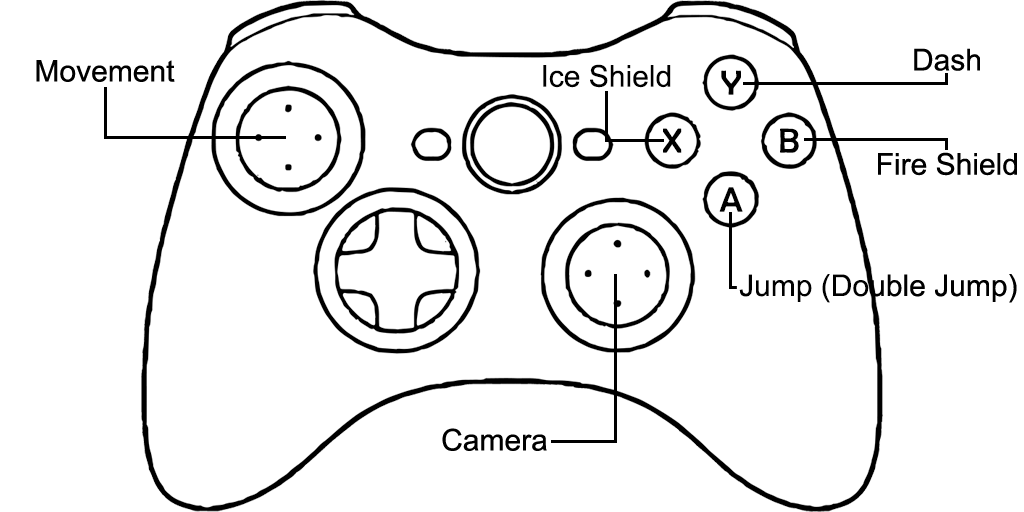
<style>
.page{position:relative;width:1024px;height:512px;background:#ffffff}
.page>*{position:absolute;margin:0}
.t1{font:30px "ArialMT";color:#000000}
.t2{font:34.9px "BerlinSansFB-Reg";color:#000000}
</style>
<div class="page">
<p class="t1" style="left:914px;top:48px;width:66px;height:23px">Dash</p>
<p class="t1" style="left:36px;top:60px;width:139px;height:22px">Movement</p>
<p class="t1" style="left:543px;top:64px;width:128px;height:24px">Ice Shield</p>
<p class="t2" style="left:721px;top:70px;width:20px;height:25px">Y</p>
<p class="t2" style="left:663px;top:128px;width:19px;height:25px">X</p>
<p class="t2" style="left:780px;top:128px;width:19px;height:25px">B</p>
<p class="t1" style="left:878px;top:152px;width:139px;height:24px">Fire Shield</p>
<p class="t2" style="left:719px;top:187px;width:24px;height:25px">A</p>
<p class="t1" style="left:739px;top:274px;width:278px;height:29px">Jump (Double Jump)</p>
<p class="t1" style="left:442px;top:428px;width:105px;height:23px">Camera</p>
</div>
